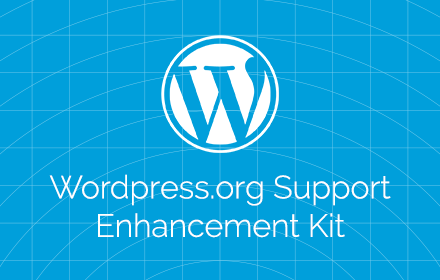
<style>
.page{position:relative;width:440px;height:280px;background:#009fdb}
.page>*{position:absolute;margin:0}
.t1{font:32px "Raleway-Light";color:#ffffff}
</style>
<div class="page">
<p class="t1" style="left:49px;top:174px;width:342px;height:64px;text-align:center">Wordpress.org Support<br>Enhancement Kit</p>
</div>
